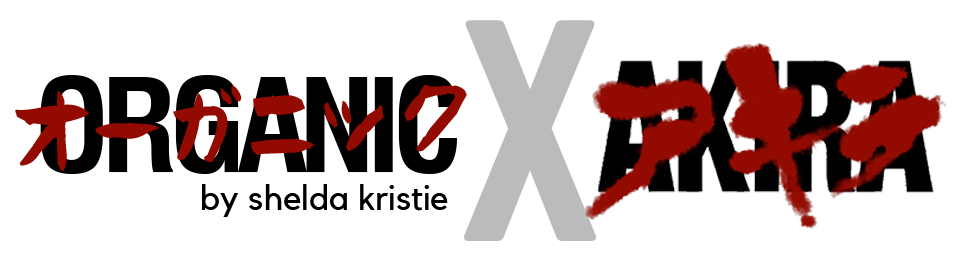
<style>
.page{position:relative;width:962px;height:262px;background:#ffffff}
.page>*{position:absolute;margin:0}
.t1{font:275.9px "Norwester-Regular";letter-spacing:-0.075em;color:#bbbbbb}
.t2{font:126.8px "Helvetica-Condensed-Bold";letter-spacing:-0.075em;color:#000000}
.t3{font:82.9px "TarokoFont";letter-spacing:-0.075em;color:#930a00}
.t4{font:34.7px "Kollektif";color:#000000}
</style>
<div class="page">
<p class="t1" style="left:464px;top:20px;width:132px;height:221px">X</p>
<p class="t2" style="left:40px;top:75px;width:417px;height:99px">ORGANIC</p>
<p class="t3" style="left:15px;top:84px;width:452px;height:87px;rotate:-2deg">オーガニック</p>
<p class="t4" style="left:202px;top:184px;width:246px;height:33px">by shelda kristie</p>
</div>
